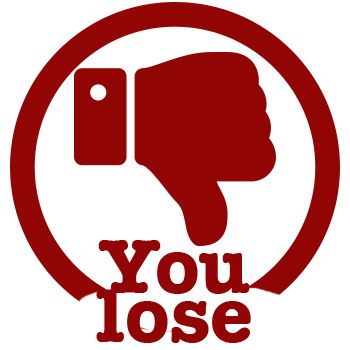
<style>
.page{position:relative;width:350px;height:350px;background:#ffffff}
.page>*{position:absolute;margin:0}
.t1{font:79px/49px "AmericanTypewriter-Bold";color:#920303}
</style>
<div class="page">
<p class="t1" style="left:96px;top:240px;width:155px;height:103px;text-align:center">You<br>lose</p>
</div>
